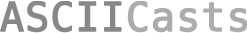
<style>
.page{position:relative;width:247px;height:33px;background:#ffffff}
.page>*{position:absolute;margin:0}
.t1{font:40px "Menlo-Regular";color:#888888;font-weight:bold}
.t2{font:40px "Menlo-Regular";color:#acacac;font-weight:bold}
</style>
<div class="page">
<p class="t1" style="left:0px;top:1px;width:247px;height:32px">ASCII<span class="t2">Casts</span></p>
</div>
